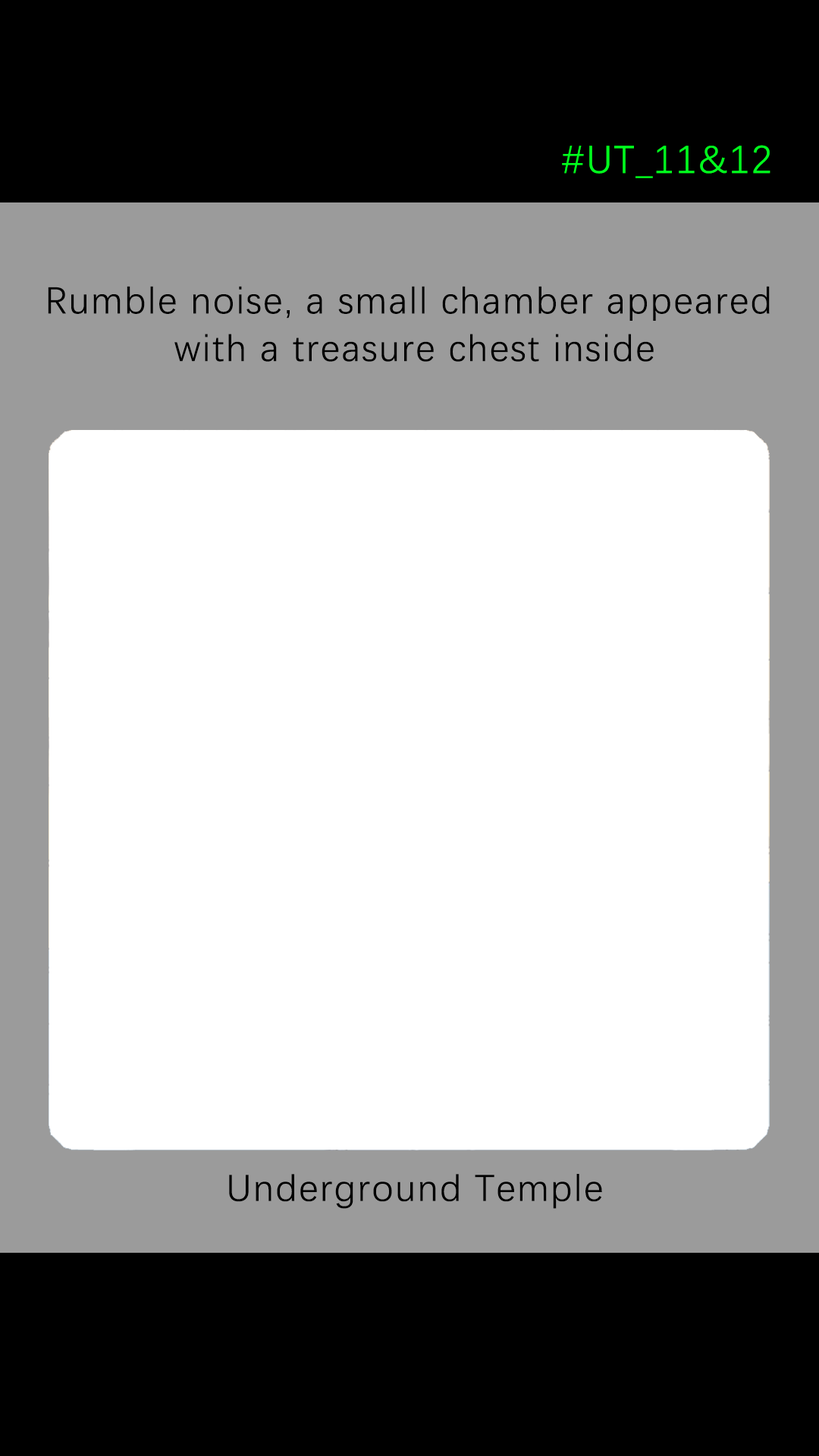
<style>
.page{position:relative;width:819px;height:1456px;background:#ffffff}
.page>*{position:absolute;margin:0}
.t1{font:39.2px "DengXian-Regular";letter-spacing:0.04em;color:#00ff1e}
.t2{font:37.9px/47.6px "DengXian-Regular";letter-spacing:0.04em;color:#000000}
.t3{font:37.9px "DengXian-Regular";letter-spacing:0.04em;color:#000000}
</style>
<div class="page">
<p class="t1" style="left:562px;top:145px;width:208px;height:33px">#UT_11&amp;12</p>
<p class="t2" style="left:48px;top:286px;width:722px;height:76px;text-align:center">Rumble noise, a small chamber appeared <br>with a treasure chest inside</p>
<p class="t3" style="left:229px;top:1174px;width:373px;height:35px">Underground Temple</p>
</div>
